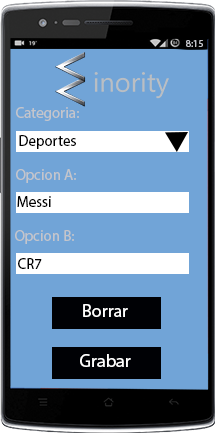
<style>
.page{position:relative;width:215px;height:433px;background:#71a4d7}
.page>*{position:absolute;margin:0}
.t1{font:10px "MyriadPro-Regular";color:#c4c5cb}
.t2{font:15px "MyriadPro-Regular";color:#c4c5cb}
.t3{font:15px "MyriadPro-Regular";color:#000000}
.t4{font:15px "MyriadPro-Regular";color:#000001}
.t5{font:18px "MyriadPro-Regular";color:#ffffff}
</style>
<div class="page">
<p class="t1" style="left:186px;top:40px;width:17px;height:7px">8:15</p>
<p class="t2" style="left:16px;top:107px;width:63px;height:14px">Categoria:</p>
<p class="t3" style="left:19px;top:135px;width:57px;height:14px">Deportes</p>
<p class="t2" style="left:16px;top:169px;width:60px;height:14px">Opcion A:</p>
<p class="t3" style="left:17px;top:196px;width:34px;height:11px">Messi</p>
<p class="t2" style="left:15px;top:230px;width:59px;height:14px">Opcion B:</p>
<p class="t4" style="left:18px;top:258px;width:24px;height:11px">CR7</p>
<p class="t5" style="left:83px;top:304px;width:45px;height:13px">Borrar</p>
<p class="t5" style="left:80px;top:354px;width:51px;height:13px">Grabar</p>
</div>
